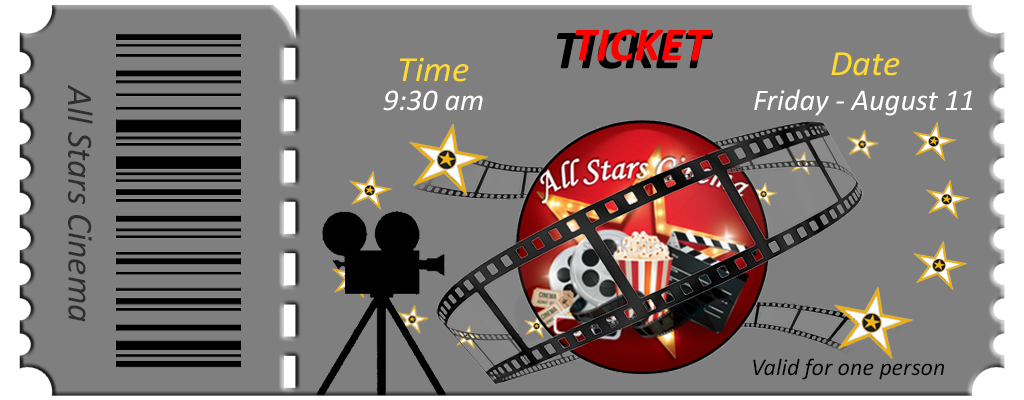
<style>
.page{position:relative;width:1024px;height:400px;background:#7f7f7f}
.page>*{position:absolute;margin:0}
.t1{font:48.1px "Calibri-BoldItalic";color:#ff0000}
.t2{font:55.3px "Calibri-BoldItalic";color:#000000}
.t3{font:35.7px "Calibri-Italic";color:#ffda30}
.t4{font:36px "Calibri-Italic";color:#2e2e2e}
.t5{font:30.2px "Calibri-Italic";color:#ffffff}
.t6{font:24.1px "Calibri-Italic";color:#000000}
</style>
<div class="page">
<p class="t1" style="left:575px;top:29px;width:138px;height:32px">TICKET</p>
<p class="t2" style="left:557px;top:32px;width:157px;height:37px">TICKET</p>
<p class="t3" style="left:831px;top:52px;width:69px;height:24px">Date</p>
<p class="t3" style="left:400px;top:57px;width:69px;height:25px">Time</p>
<p class="t4" style="left:68px;top:85px;width:25px;height:237px;rotate:90deg">All Stars Cinema</p>
<p class="t5" style="left:754px;top:89px;width:218px;height:27px">Friday - August 11</p>
<p class="t5" style="left:383px;top:90px;width:100px;height:21px">9:30 am</p>
<p class="t6" style="left:753px;top:358px;width:191px;height:22px">Valid for one person</p>
</div>
